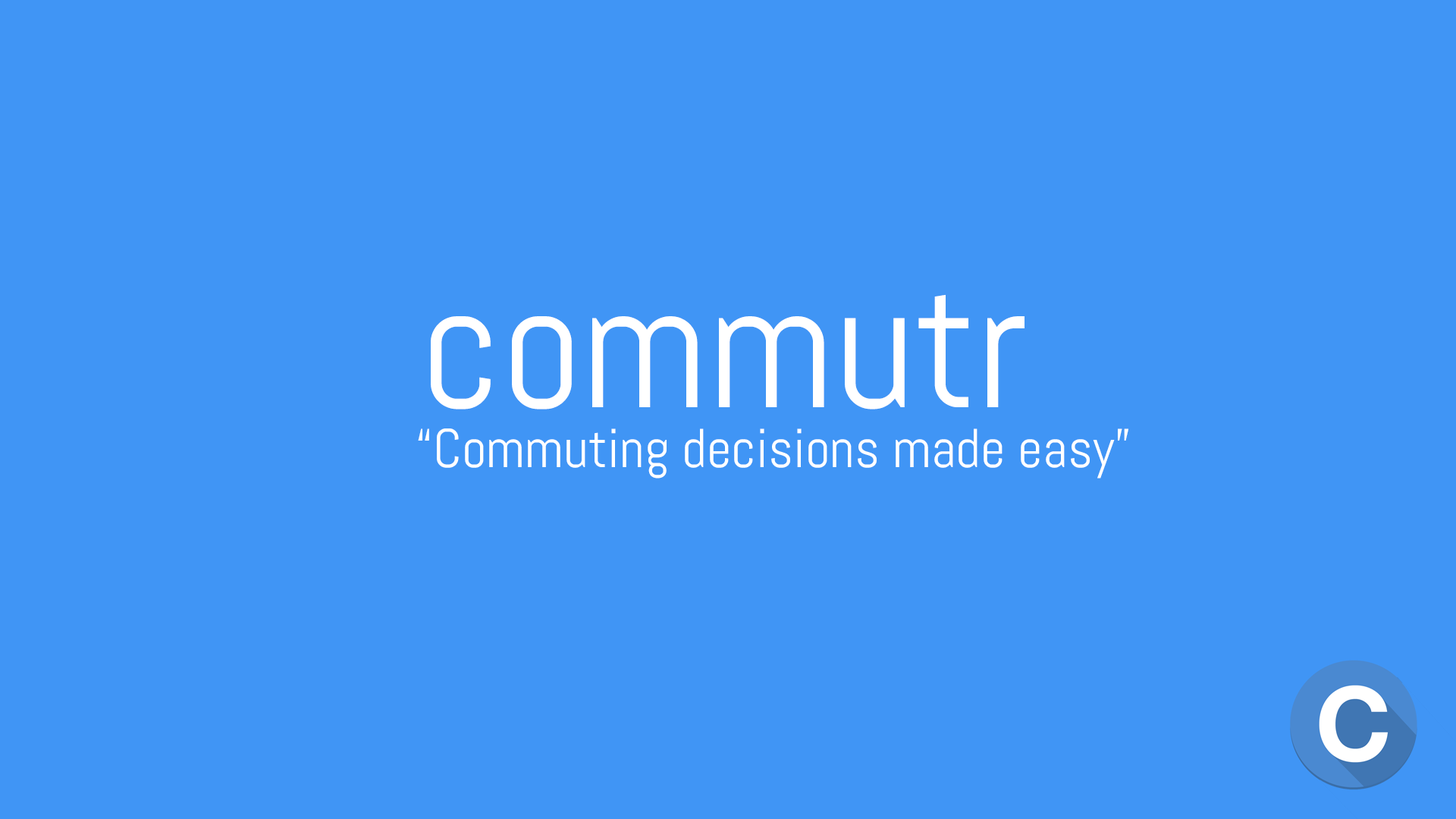
<style>
.page{position:relative;width:1456px;height:819px;background:#4095f5}
.page>*{position:absolute;margin:0}
.t1{font:178.1px "Abel-Regular";color:#ffffff}
.t2{font:54.6px "Abel-Regular";color:#ffffff}
</style>
<div class="page">
<p class="t1" style="left:431px;top:294px;width:593px;height:115px">commutr</p>
<p class="t2" style="left:418px;top:428px;width:710px;height:51px">“Commuting decisions made easy”</p>
</div>
